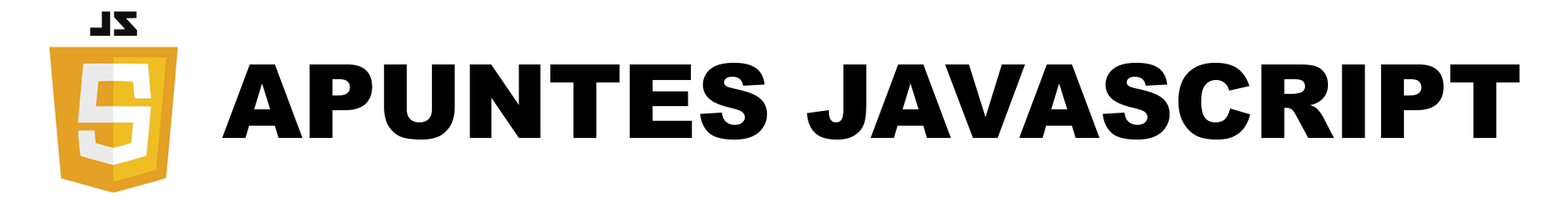
<style>
.page{position:relative;width:1568px;height:204px;background:#ffffff}
.page>*{position:absolute;margin:0}
.t1{font:102.9px "Arial-Black";color:#000000}
</style>
<div class="page">
<p class="t1" style="left:222px;top:63px;width:1298px;height:77px">APUNTES JAVASCRIPT</p>
</div>
